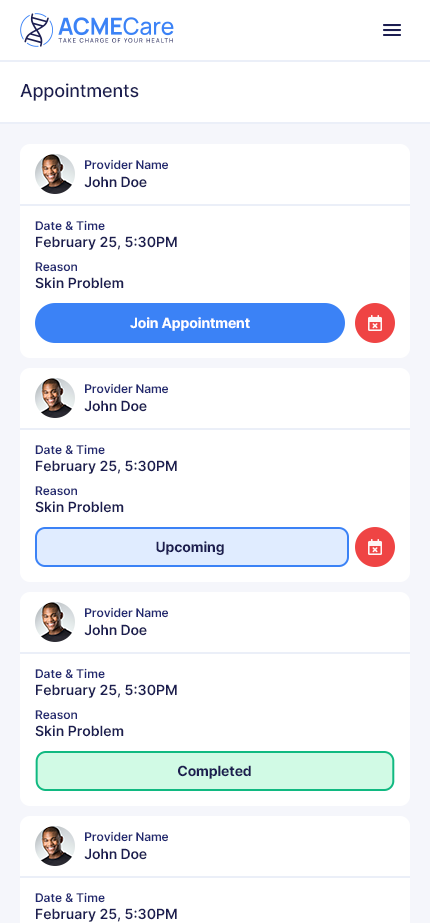
<style>
.page{position:relative;width:430px;height:923px;background:#ffffff}
.page>*{position:absolute;margin:0}
.t1{font:18px "Inter-Medium";letter-spacing:-0.01em;color:#1c1e51}
.t2{font:12px/18px "Inter-SemiBold";letter-spacing:-0.01em;color:#222971}
.t3{font:14px/18px "Inter-SemiBold";letter-spacing:-0.01em;color:#1c1e51}
.t4{font:14px "Inter-SemiBold";color:#1c1e51}
.t5{font:12px "Inter-SemiBold";color:#222971}
.t6{font:14px "Inter-Bold";letter-spacing:-0.01em;color:#ffffff}
.t7{font:14px "Inter-Bold";letter-spacing:-0.01em;color:#1c1e51}
</style>
<div class="page">
<p class="t1" style="left:20px;top:83px;width:119px;height:18px">Appointments</p>
<p class="t2" style="left:84px;top:159px;width:84px;height:29px">Provider Name<br><span class="t3">John Doe</span></p>
<p class="t4" style="left:35px;top:220px;width:142px;height:30px"><span class="t5">Date &amp; Time<br></span>February 25, 5:30PM</p>
<p class="t4" style="left:35px;top:262px;width:89px;height:27px"><span class="t5">Reason<br></span>Skin Problem</p>
<p class="t6" style="left:130px;top:317px;width:120px;height:14px">Join Appointment</p>
<p class="t2" style="left:84px;top:383px;width:84px;height:29px">Provider Name<br><span class="t3">John Doe</span></p>
<p class="t4" style="left:35px;top:444px;width:142px;height:30px"><span class="t5">Date &amp; Time<br></span>February 25, 5:30PM</p>
<p class="t4" style="left:35px;top:486px;width:89px;height:27px"><span class="t5">Reason<br></span>Skin Problem</p>
<p class="t7" style="left:156px;top:541px;width:68px;height:14px">Upcoming</p>
<p class="t2" style="left:84px;top:607px;width:84px;height:29px">Provider Name<br><span class="t3">John Doe</span></p>
<p class="t4" style="left:35px;top:668px;width:142px;height:30px"><span class="t5">Date &amp; Time<br></span>February 25, 5:30PM</p>
<p class="t4" style="left:35px;top:710px;width:89px;height:27px"><span class="t5">Reason<br></span>Skin Problem</p>
<p class="t7" style="left:178px;top:765px;width:73px;height:14px">Completed</p>
<p class="t2" style="left:84px;top:831px;width:84px;height:29px">Provider Name<br><span class="t3">John Doe</span></p>
<p class="t4" style="left:35px;top:892px;width:142px;height:30px"><span class="t5">Date &amp; Time<br></span>February 25, 5:30PM</p>
</div>
